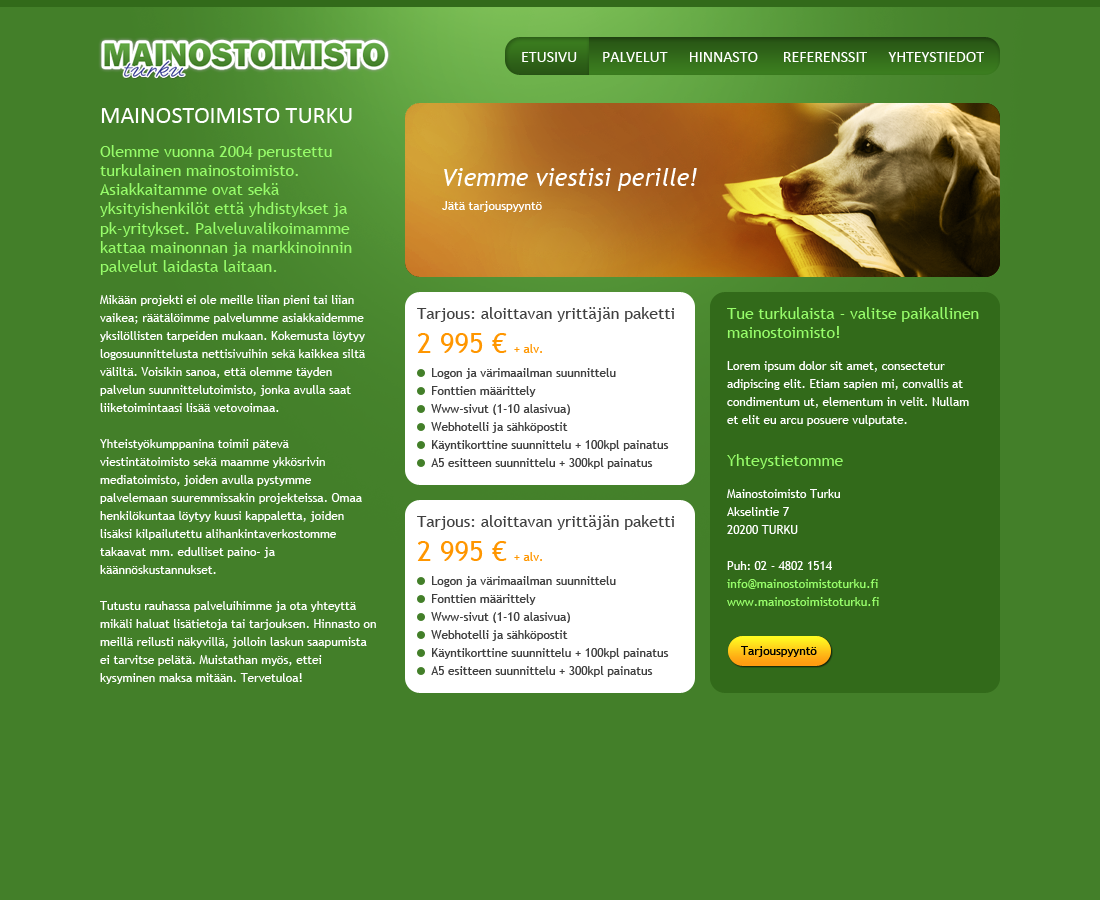
<style>
.page{position:relative;width:1100px;height:900px;background:#437f29}
.page>*{position:absolute;margin:0}
.t1{font:16px "Calibri";letter-spacing:-0.004em;color:#ffffff;text-transform:uppercase}
.t2{font:12px/18px "TrebuchetMS";letter-spacing:-0.004em;color:#ffffff}
.t3{font:24px "Calibri";letter-spacing:-0.004em;color:#ffffff;text-transform:uppercase}
.t4{font:16px "TrebuchetMS";letter-spacing:-0.004em;color:#97fd6a}
.t5{font:24px "TrebuchetMS-Italic";letter-spacing:-0.004em;color:#ffffff}
.t6{font:12px "TrebuchetMS";letter-spacing:-0.004em;color:#ffffff}
.t7{font:12px/18px "TrebuchetMS";letter-spacing:-0.004em;color:#404040}
.t8{font:16px "TrebuchetMS";letter-spacing:-0.004em;color:#404040}
.t9{font:28px "TrebuchetMS";letter-spacing:-0.004em;color:#ff9600}
.t10{font:12px "TrebuchetMS";letter-spacing:-0.004em;color:#ff9600}
.t11{font:12px/18px "TrebuchetMS";letter-spacing:-0.004em;color:#97fd6a}
.t12{font:12px "TrebuchetMS";letter-spacing:-0.004em;color:#000000}
</style>
<div class="page">
<p class="t1" style="left:522px;top:52px;width:462px;height:10px">Etusivu       Palvelut      Hinnasto       Referenssit      Yhteystiedot</p>
<p class="t2" style="left:100px;top:108px;width:276px;height:576px"><span class="t3">Mainostoimisto Turku<br><br></span><span class="t4">Olemme vuonna 2004 perustettu turkulainen mainostoimisto. Asiakkaitamme ovat sekä yksityishenkilöt että yhdistykset ja pk-yritykset. Palveluvalikoimamme kattaa mainonnan ja markkinoinnin palvelut laidasta laitaan. <br><br></span>Mikään projekti ei ole meille liian pieni tai liian vaikea; räätälöimme palvelumme asiakkaidemme yksilöllisten tarpeiden mukaan. Kokemusta löytyy logosuunnittelusta nettisivuihin sekä kaikkea siltä väliltä. Voisikin sanoa, että olemme täyden palvelun suunnittelutoimisto, jonka avulla saat liiketoimintaasi lisää vetovoimaa.<br><br>Yhteistyökumppanina toimii pätevä viestintätoimisto sekä maamme ykkösrivin mediatoimisto, joiden avulla pystymme palvelemaan suuremmissakin projekteissa. Omaa henkilökuntaa löytyy kuusi kappaletta, joiden lisäksi kilpailutettu alihankintaverkostomme takaavat mm. edulliset paino- ja käännöskustannukset.<br><br>Tutustu rauhassa palveluihimme ja ota yhteyttä mikäli haluat lisätietoja tai tarjouksen. Hinnasto on meillä reilusti näkyvillä, jolloin laskun saapumista ei tarvitse pelätä. Muistathan myös, ettei kysyminen maksa mitään. Tervetuloa!</p>
<p class="t5" style="left:442px;top:168px;width:255px;height:44px">Viemme viestisi perille!<br><br><span class="t6">Jätä tarjouspyyntö</span></p>
<p class="t7" style="left:417px;top:307px;width:257px;height:162px"><span class="t8">Tarjous: aloittavan yrittäjän paketti<br></span><span class="t9">2 995 € </span><span class="t10">+ alv.<br><br>   </span> Logon ja värimaailman suunnittelu<br>    Fonttien määrittely<br>    Www-sivut (1-10 alasivua)<br>    Webhotelli ja sähköpostit<br>    Käyntikorttine suunnittelu + 100kpl painatus<br>    A5 esitteen suunnittelu + 300kpl painatus</p>
<p class="t2" style="left:727px;top:307px;width:252px;height:299px"><span class="t4">Tue turkulaista - valitse paikallinen mainostoimisto!<br><br></span>Lorem ipsum dolor sit amet, consectetur adipiscing elit. Etiam sapien mi, convallis at condimentum ut, elementum in velit. Nullam et elit eu arcu posuere vulputate.<br><br><br><span class="t4">Yhteystietomme<br><br></span>Mainostoimisto Turku<br>Akselintie 7<br>20200 TURKU<br><br>Puh: 02 - 4802 1514<br><span class="t11">info@mainostoimistoturku.fi<br>www.mainostoimistoturku.fi</span></p>
<p class="t7" style="left:417px;top:515px;width:257px;height:162px"><span class="t8">Tarjous: aloittavan yrittäjän paketti<br></span><span class="t9">2 995 € </span><span class="t10">+ alv.<br><br>   </span> Logon ja värimaailman suunnittelu<br>    Fonttien määrittely<br>    Www-sivut (1-10 alasivua)<br>    Webhotelli ja sähköpostit<br>    Käyntikorttine suunnittelu + 100kpl painatus<br>    A5 esitteen suunnittelu + 300kpl painatus</p>
<p class="t12" style="left:741px;top:646px;width:76px;height:11px">Tarjouspyyntö</p>
</div>
